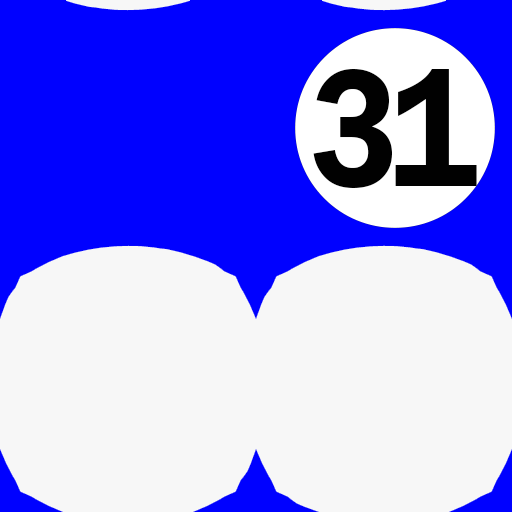
<style>
.page{position:relative;width:512px;height:512px;background:#f7f7f7}
.page>*{position:absolute;margin:0}
.t1{font:172.5px "FranklinGothic-Demi";letter-spacing:-0.05em;color:#010101;scale:0.87 1}
</style>
<div class="page">
<p class="t1" style="left:313px;top:69px;width:164px;height:119px">31</p>
</div>
